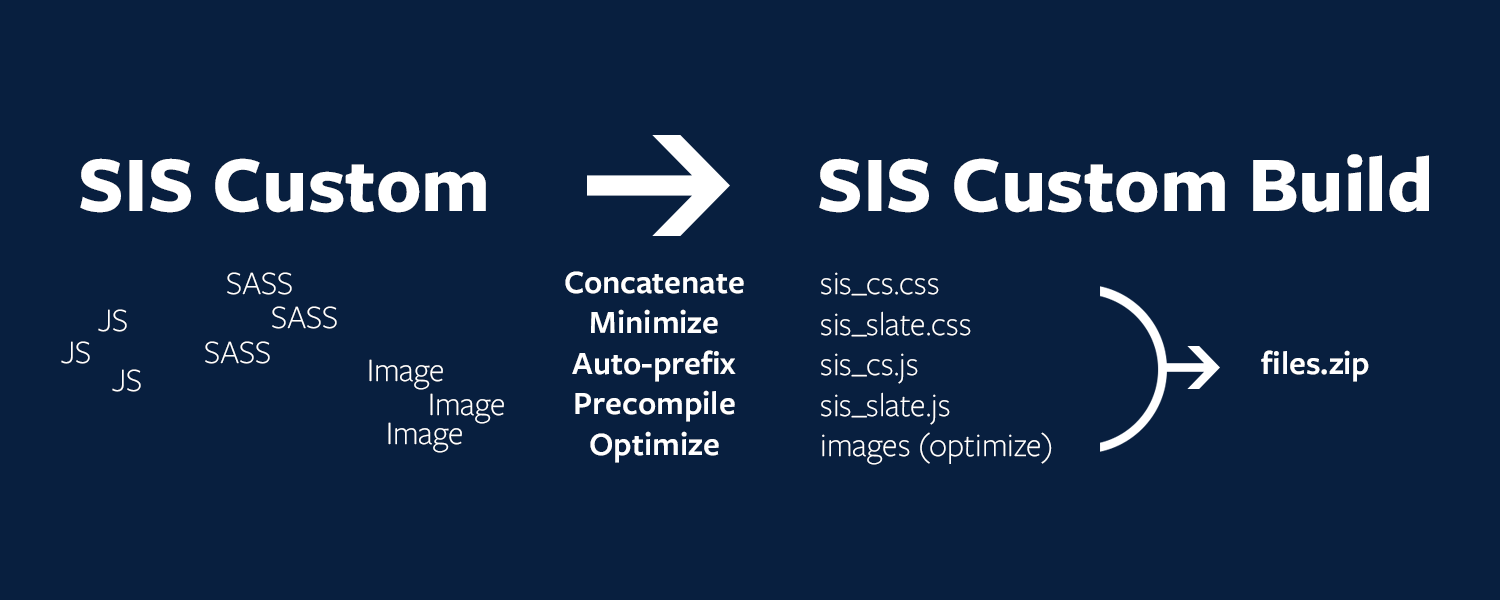
<style>
.page{position:relative;width:1500px;height:600px;background:#081f3f}
.page>*{position:absolute;margin:0}
.t1{font:81.6px "FreightSansProBold-Regular";color:#ffffff}
.t2{font:33.8px "FreightSansProLight-Regular";color:#ffffff}
.t3{font:33.8px "FreightSansProSemibold-Regular";color:#ffffff}
</style>
<div class="page">
<p class="t1" style="left:80px;top:158px;width:406px;height:55px">SIS Custom</p>
<p class="t1" style="left:819px;top:154px;width:610px;height:59px">SIS Custom Build</p>
<p class="t2" style="left:227px;top:272px;width:65px;height:23px">SASS</p>
<p class="t3" style="left:565px;top:271px;width:179px;height:192px;text-align:center">Concatenate<br>Minimize<br>Auto-prefix<br>Precompile<br>Optimize</p>
<p class="t2" style="left:821px;top:272px;width:231px;height:193px">sis_cs.css<br>sis_slate.css<br>sis_cs.js<br>sis_slate.js<br>images (optimize)</p>
<p class="t2" style="left:98px;top:309px;width:29px;height:23px">JS</p>
<p class="t2" style="left:272px;top:306px;width:65px;height:23px">SASS</p>
<p class="t2" style="left:61px;top:341px;width:29px;height:23px">JS</p>
<p class="t2" style="left:205px;top:341px;width:65px;height:23px">SASS</p>
<p class="t3" style="left:1261px;top:350px;width:108px;height:32px">files.zip</p>
<p class="t2" style="left:369px;top:359px;width:74px;height:31px">Image</p>
<p class="t2" style="left:112px;top:369px;width:29px;height:23px">JS</p>
<p class="t2" style="left:430px;top:393px;width:74px;height:31px">Image</p>
<p class="t2" style="left:388px;top:422px;width:74px;height:31px">Image</p>
</div>
